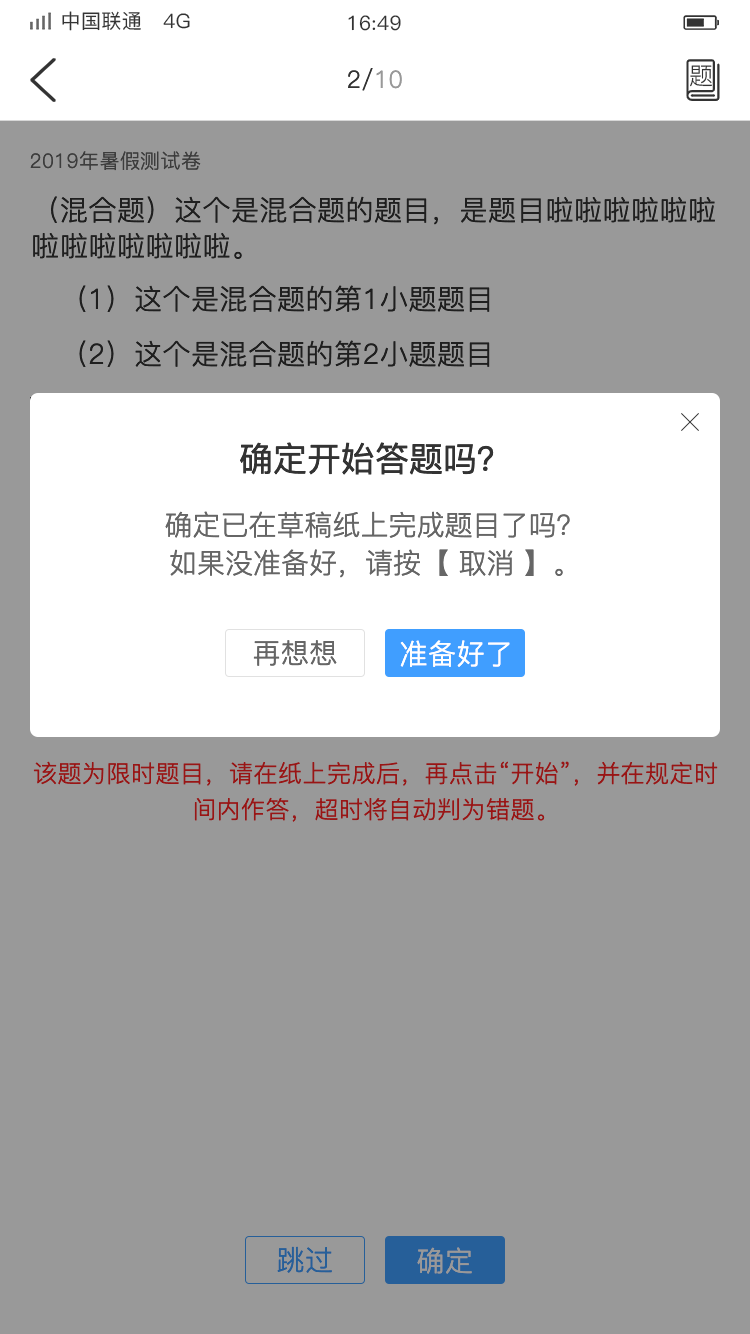
<style>
.page{position:relative;width:750px;height:1334px;background:#999999}
.page>*{position:absolute;margin:0}
.t1{font:20px "PingFang-SC-Medium";letter-spacing:0.02em;color:#333333}
.t2{font:24px "PingFang-SC-Regular";letter-spacing:0.02em;color:#333333}
.t3{font:24px "PingFang-SC-Regular";letter-spacing:0.02em;color:#999999}
.t4{font:20px "PingFang-SC-Regular";letter-spacing:0.02em;color:#3d3d3d}
.t5{font:28px/36px "PingFang-SC-Regular";letter-spacing:0.02em;color:#333333}
.t6{font:28px "PingFang-SC-Regular";letter-spacing:0.02em;color:#333333}
.t7{font:34px "PingFang-SC-Medium";color:#333333}
.t8{font:28px/38px "PingFang-SC-Regular";color:#666666}
.t9{font:28px "PingFang-SC-Regular";letter-spacing:0.02em;color:#666666}
.t10{font:28px "PingFang-SC-Regular";letter-spacing:0.02em;color:#ffffff}
.t11{font:24px/36px "PingFang-SC-Regular";letter-spacing:0.02em;color:#991515}
.t12{font:28px "PingFang-SC-Regular";letter-spacing:0.02em;color:#265f99}
.t13{font:28px "PingFang-SC-Regular";letter-spacing:0.02em;color:#999999}
</style>
<div class="page">
<p class="t1" style="left:62px;top:11px;width:128px;height:20px">中国联通   4G</p>
<p class="t1" style="left:348px;top:15px;width:53px;height:16px">16:49</p>
<p class="t2" style="left:690px;top:65px;width:22px;height:22px">题</p>
<p class="t2" style="left:348px;top:68px;width:54px;height:23px">2/<span class="t3">10</span></p>
<p class="t4" style="left:30px;top:151px;width:171px;height:20px">2019年暑假测试卷</p>
<p class="t5" style="left:33px;top:196px;width:682px;height:63px">（混合题）这个是混合题的题目，是题目啦啦啦啦啦啦啦啦啦啦啦啦啦。</p>
<p class="t6" style="left:79px;top:285px;width:411px;height:27px">（1）这个是混合题的第1小题题目</p>
<p class="t6" style="left:79px;top:340px;width:411px;height:27px">（2）这个是混合题的第2小题题目</p>
<p class="t7" style="left:240px;top:442px;width:254px;height:33px">确定开始答题吗？</p>
<p class="t8" style="left:165px;top:511px;width:405px;height:67px;text-align:center">确定已在草稿纸上完成题目了吗？<br>如果没准备好，请按【 取消 】。</p>
<p class="t9" style="left:253px;top:640px;width:84px;height:26px">再想想</p>
<p class="t10" style="left:400px;top:640px;width:110px;height:27px">准备好了</p>
<p class="t11" style="left:33px;top:761px;width:685px;height:61px;text-align:center">该题为限时题目，请在纸上完成后，再点击“开始”，并在规定时间内作答，超时将自动判为错题。</p>
<p class="t12" style="left:277px;top:1246px;width:55px;height:27px">跳过</p>
<p class="t13" style="left:417px;top:1247px;width:55px;height:27px">确定</p>
</div>
